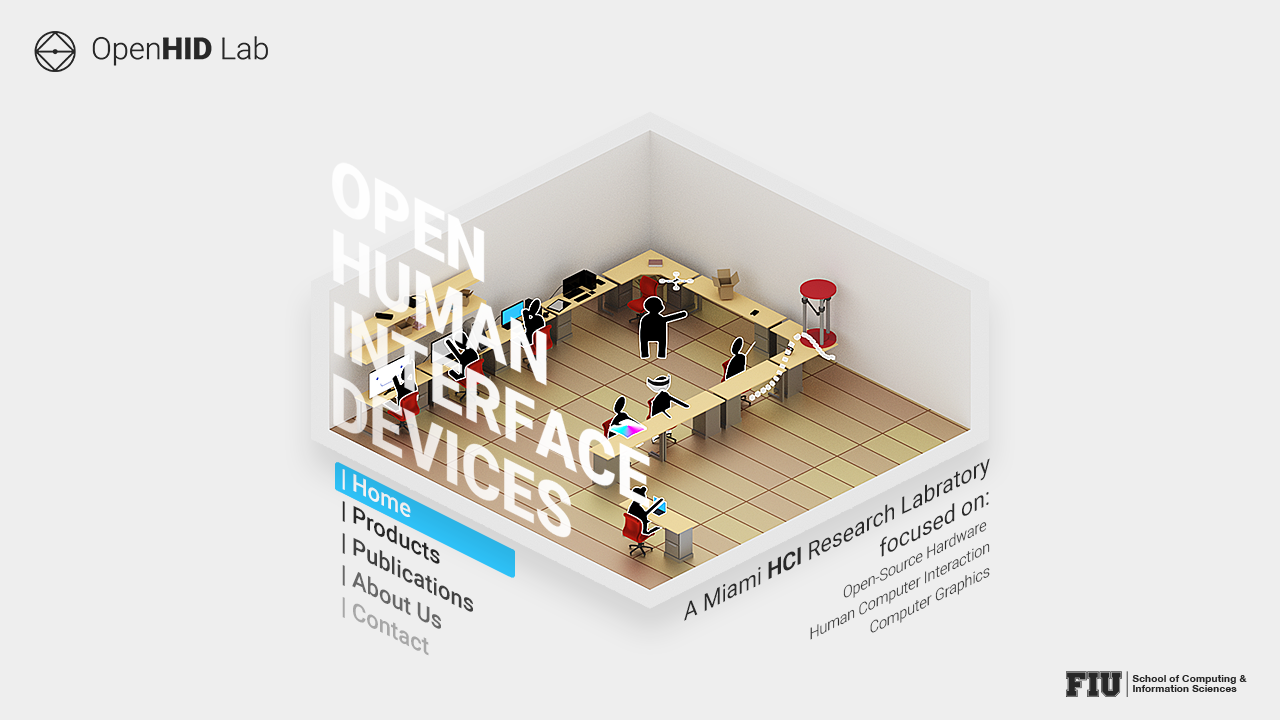
<style>
.page{position:relative;width:1280px;height:720px;background:#eeeeee}
.page>*{position:absolute;margin:0}
.t1{font:16px/24px "Roboto-Light";color:#2b2b2b}
.t2{font:24px/32px "Roboto-Regular";color:#2b2b2b}
.t3{font:24px/32px "Roboto-Bold";color:#2b2b2b}
.t4{font:24px/32px "Roboto-Medium";color:#404040}
.t5{font:24px/32px "Roboto-Medium";color:#ffffff}
.t6{font:24px/32px "Roboto-Medium";color:#272727}
.t7{font:24px/32px "Roboto-Medium";color:#676767}
.t8{font:24px/32px "Roboto-Medium";color:#a7a7a7}
</style>
<div class="page">
<p class="t1" style="left:684px;top:458px;width:306px;height:182px;text-align:right;rotate:-26deg"><span class="t2">A Miami </span><span class="t3">HCI </span><span class="t2">Research Labratory<br>focused on:<br></span>Open-Source Hardware <br>Human Computer Interaction<br>Computer Graphics</p>
<p class="t4" style="left:342px;top:469px;width:131px;height:187px;rotate:26deg"><span class="t5">| Home<br></span><span class="t6">| Products<br></span>| Publications<br><span class="t7">| About Us<br></span><span class="t8">| Contact</span></p>
</div>
